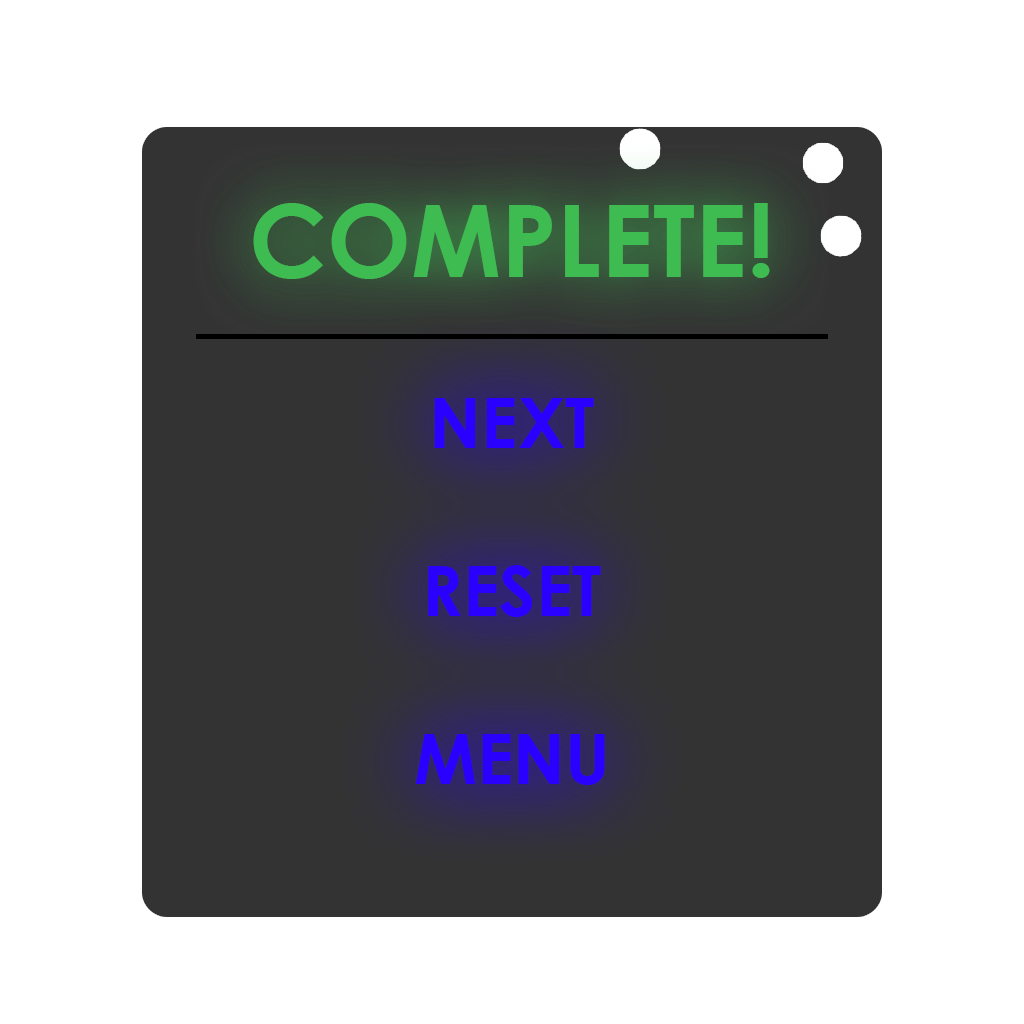
<style>
.page{position:relative;width:1024px;height:1024px;background:#ffffff}
.page>*{position:absolute;margin:0}
.t1{font:100px "CenturyGothic-Bold";color:#3fbc51}
.t2{font:70px "CenturyGothic-Bold";color:#2a00ff}
</style>
<div class="page">
<p class="t1" style="left:253px;top:203px;width:517px;height:76px">COMPLETE!</p>
<p class="t2" style="left:416px;top:398px;width:189px;height:387px;text-align:center">NEXT<br><br>RESET<br><br>MENU</p>
</div>
